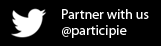
<style>
.page{position:relative;width:161px;height:46px;background:#000000}
.page>*{position:absolute;margin:0}
.t1{font:14px/16.4px "MyriadPro-Regular";color:#fefefe}
</style>
<div class="page">
<p class="t1" style="left:62px;top:9px;width:87px;height:29px">Partner with us<br>@participie</p>
</div>
